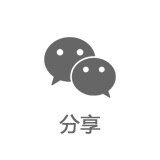
<style>
.page{position:relative;width:160px;height:160px;background:#ffffff}
.page>*{position:absolute;margin:0}
.t1{font:20px "MicrosoftYaHei";color:#666666;font-weight:bold}
</style>
<div class="page">
<p class="t1" style="left:59px;top:114px;width:42px;height:20px">分享</p>
</div>
